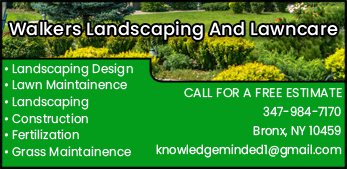
<style>
.page{position:relative;width:347px;height:169px;background:#049d1b}
.page>*{position:absolute;margin:0}
.t1{font:17.7px "Poppins-Medium";letter-spacing:0.012em;color:#ffffff}
.t2{font:12.5px/16.7px "Poppins-Regular";letter-spacing:0.012em;color:#ffffff;scale:0.94 1}
.t3{font:12.5px "Poppins-Regular";letter-spacing:0.005em;color:#ffffff;text-transform:uppercase}
.t4{font:12.5px/18.8px "Poppins-Regular";letter-spacing:0.005em;color:#ffffff;scale:0.92 1}
</style>
<div class="page">
<p class="t1" style="left:9px;top:21px;width:329px;height:19px">Walkers Landscaping And Lawncare</p>
<p class="t2" style="left:4px;top:63px;width:129px;height:94px">• Landscaping Design <br>• Lawn Maintainence <br>• Landscaping <br>• Construction <br>• Fertilization<br>• Grass Maintainence</p>
<p class="t3" style="left:184px;top:88px;width:158px;height:10px">Call For A Free Estimate</p>
<p class="t4" style="left:156px;top:106px;width:186px;height:52px;text-align:right">347-984-7170<br>Bronx, NY 10459<br>knowledgeminded1@gmail.com</p>
</div>
